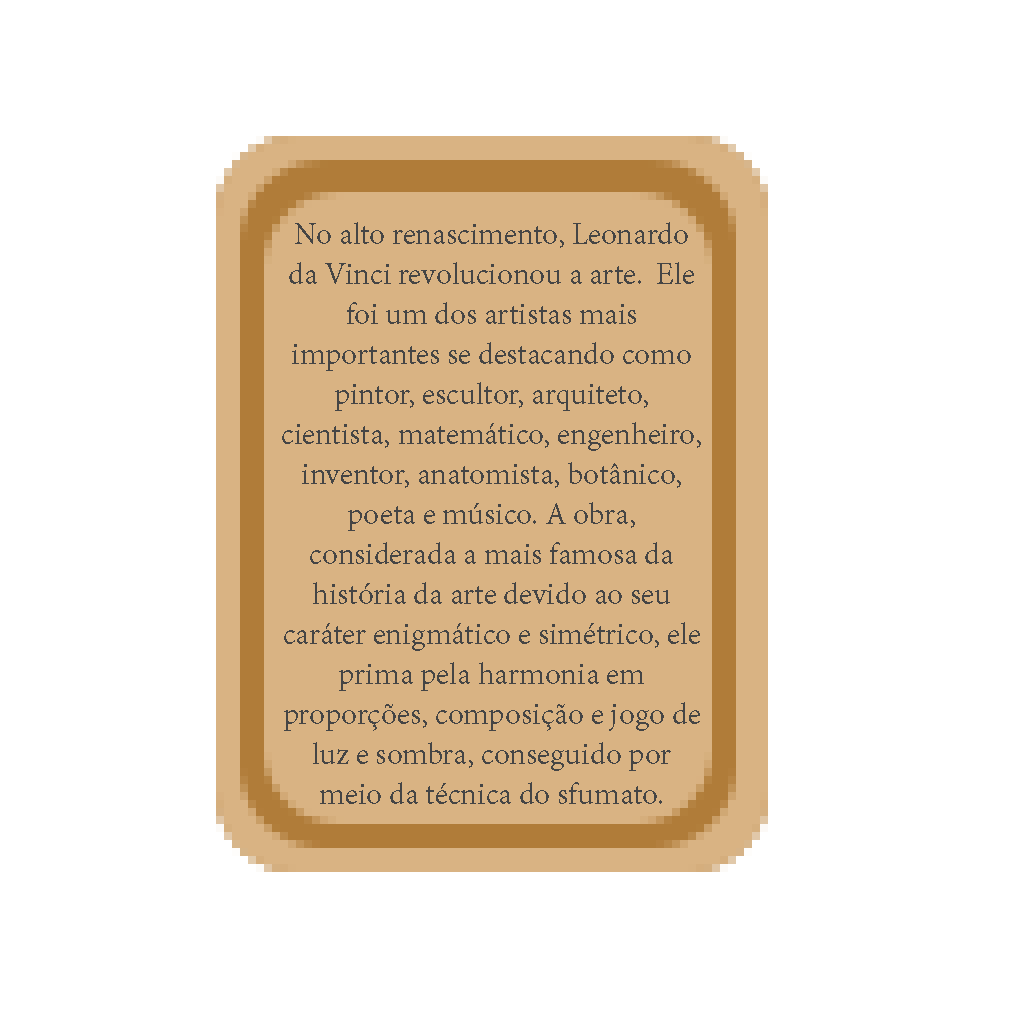
<style>
.page{position:relative;width:1024px;height:1024px;background:#ffffff}
.page>*{position:absolute;margin:0}
.t1{font:33.3px "AdobeDevanagari-Regular";color:#454545}
</style>
<div class="page">
<p class="t1" style="left:282px;top:222px;width:419px;height:582px;text-align:center">No alto renascimento, Leonardo da Vinci revolucionou a arte.  Ele foi um dos artistas mais importantes se destacando como pintor, escultor, arquiteto, cientista, matemático, engenheiro, inventor, anatomista, botânico, poeta e músico. A obra, considerada a mais famosa da história da arte devido ao seu caráter enigmático e simétrico, ele prima pela harmonia em proporções, composição e jogo de luz e sombra, conseguido por meio da técnica do sfumato.</p>
</div>
